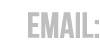
<style>
.page{position:relative;width:100px;height:50px;background:#ffffff}
.page>*{position:absolute;margin:0}
.t1{font:36px "BebasNeue";letter-spacing:-0.025em;color:#bebebe;font-weight:bold}
</style>
<div class="page">
<p class="t1" style="left:28px;top:12px;width:71px;height:26px">Email:</p>
</div>
